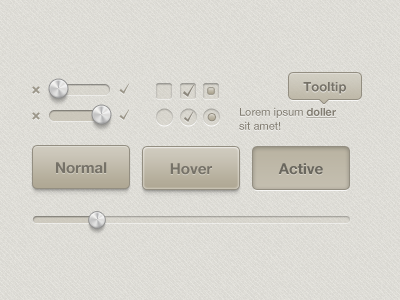
<style>
.page{position:relative;width:400px;height:300px}
.page>*{position:absolute;margin:0}
.t1{font:13px "HelveticaNeue-Bold";color:#767268}
.t2{font:11px/14px "HelveticaNeue";color:#827d72}
.t3{font:11px/14px "HelveticaNeue-Bold";color:#827d72;text-decoration:underline}
.t4{font:15px "HelveticaNeue-Bold";color:#767268}
.t5{font:15px "HelveticaNeue-Bold";color:#6a675e}
</style>
<div class="page">
<p class="t1" style="left:303px;top:82px;width:43px;height:12px">Tooltip</p>
<p class="t2" style="left:239px;top:107px;width:98px;height:23px">Lorem ipsum <span class="t3">doller </span>sit amet!</p>
<p class="t4" style="left:56px;top:162px;width:51px;height:12px">Normal</p>
<p class="t4" style="left:170px;top:163px;width:42px;height:12px">Hover</p>
<p class="t5" style="left:278px;top:163px;width:45px;height:12px">Active</p>
</div>
